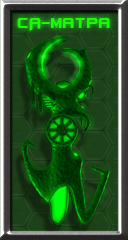
<style>
.page{position:relative;width:128px;height:240px}
.page>*{position:absolute;margin:0}
.t1{font:16.8px "AeromaticsNC";color:#1bfa02;scale:0.78 1}
</style>
<div class="page">
<p class="t1" style="left:17px;top:18px;width:93px;height:13px">CA-матра</p>
</div>
